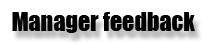
<style>
.page{position:relative;width:208px;height:45px;background:#ffffff}
.page>*{position:absolute;margin:0}
.t1{font:24px "Impact";color:#000000}
</style>
<div class="page">
<p class="t1" style="left:12px;top:12px;width:183px;height:21px">Manager feedback</p>
</div>
